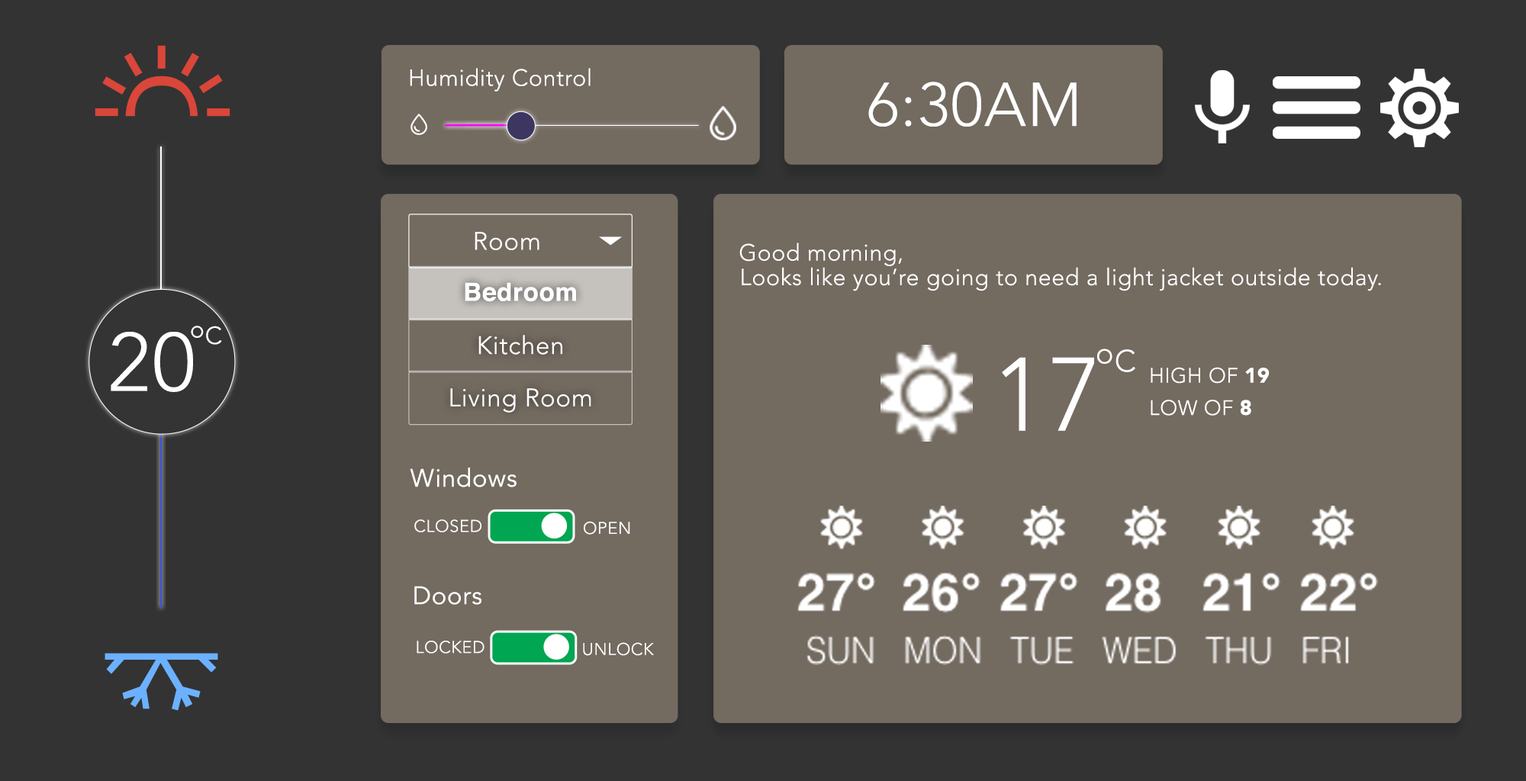
<style>
.page{position:relative;width:1526px;height:781px;background:#736a60}
.page>*{position:absolute;margin:0}
.t1{font:23.1px "Avenir-Light";letter-spacing:0.025em;color:#ffffff}
.t2{font:61px "Avenir-Light";letter-spacing:0.025em;color:#ffffff}
.t3{font:25.1px "Avenir-Light";letter-spacing:0.025em;color:#ffffff}
.t4{font:23.1px/24.6px "Avenir-Light";letter-spacing:0.025em;color:#ffffff}
.t5{font:25.1px "Helvetica-Bold";letter-spacing:0.025em;color:#ffffff}
.t6{font:24.1px "Avenir-Light";letter-spacing:0.025em;color:#ffffff}
.t7{font:82.1px "Avenir-Light";letter-spacing:0.025em;color:#ffffff}
.t8{font:30.3px "Avenir-Light";letter-spacing:0.025em;color:#ffffff}
.t9{font:103.2px "Avenir-Light";letter-spacing:0.025em;color:#ffffff}
.t10{font:20.8px "Avenir-Light";letter-spacing:0.025em;color:#ffffff}
.t11{font:20.8px "Avenir-Black";letter-spacing:0.025em;color:#ffffff}
.t12{font:25px "Avenir-Book";letter-spacing:0.025em;color:#ffffff}
.t13{font:16.8px "Avenir-Light";letter-spacing:0.025em;color:#ffffff}
</style>
<div class="page">
<p class="t1" style="left:410px;top:68px;width:181px;height:24px">Humidity Control</p>
<p class="t2" style="left:868px;top:82px;width:209px;height:45px">6:30AM</p>
<p class="t3" style="left:475px;top:232px;width:64px;height:18px">Room</p>
<p class="t4" style="left:739px;top:243px;width:642px;height:48px">Good morning, <br>    Looks like you’re going to need a light jacket outside today.</p>
<p class="t5" style="left:465px;top:282px;width:111px;height:20px">Bedroom</p>
<p class="t6" style="left:191px;top:326px;width:13px;height:12px">o</p>
<p class="t6" style="left:206px;top:326px;width:16px;height:19px">C</p>
<p class="t7" style="left:111px;top:332px;width:82px;height:60px">20</p>
<p class="t3" style="left:478px;top:335px;width:84px;height:20px">Kitchen</p>
<p class="t8" style="left:1097px;top:349px;width:16px;height:15px">o</p>
<p class="t8" style="left:1116px;top:349px;width:19px;height:23px">C</p>
<p class="t9" style="left:1002px;top:357px;width:92px;height:74px">17</p>
<p class="t10" style="left:1151px;top:367px;width:119px;height:17px">HIGH OF <span class="t11">19</span></p>
<p class="t3" style="left:450px;top:388px;width:141px;height:25px">Living Room</p>
<p class="t10" style="left:1151px;top:400px;width:100px;height:16px">LOW OF <span class="t11">8</span></p>
<p class="t12" style="left:410px;top:468px;width:107px;height:20px">Windows</p>
<p class="t13" style="left:414px;top:520px;width:67px;height:13px">CLOSED</p>
<p class="t13" style="left:584px;top:521px;width:46px;height:14px">OPEN</p>
<p class="t12" style="left:414px;top:586px;width:67px;height:19px">Doors</p>
<p class="t13" style="left:417px;top:641px;width:68px;height:13px">LOCKED</p>
<p class="t13" style="left:583px;top:642px;width:71px;height:14px">UNLOCK</p>
</div>
